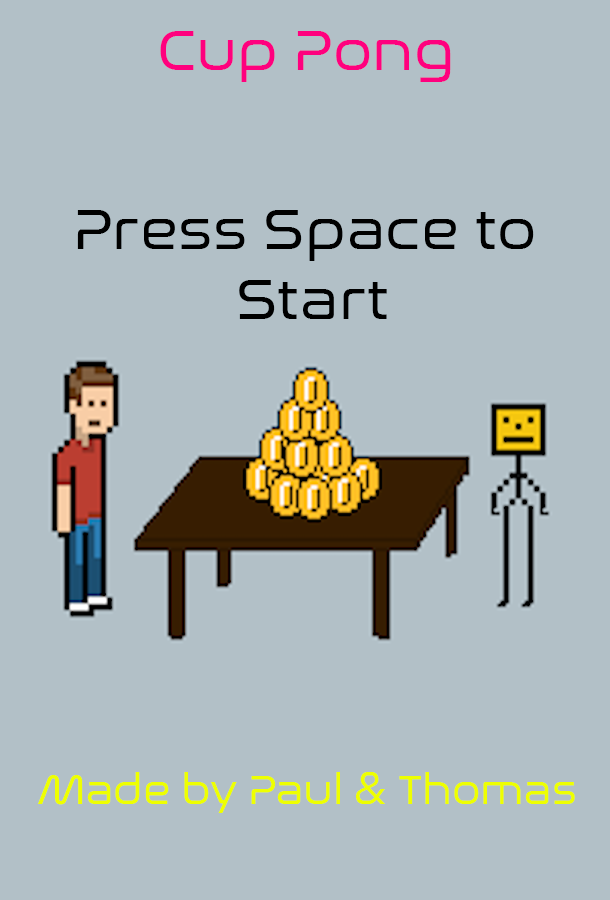
<style>
.page{position:relative;width:610px;height:900px;background:#b2c0c7}
.page>*{position:absolute;margin:0}
.t1{font:58.3px "NasalizationBk-Regular";color:#ff007e}
.t2{font:58.3px "NasalizationBk-Regular";color:#000000}
.t3{font:41.7px "NasalizationBk-Regular";color:#eeff00}
</style>
<div class="page">
<p class="t1" style="left:160px;top:31px;width:291px;height:51px">Cup Pong</p>
<p class="t2" style="left:77px;top:210px;width:457px;height:109px;text-align:center">Press Space to <br>Start</p>
<p class="t3" style="left:38px;top:772px;width:537px;height:41px">Made by Paul &amp; Thomas</p>
</div>
